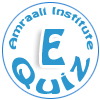
<style>
.page{position:relative;width:100px;height:100px;background:#ffffff}
.page>*{position:absolute;margin:0}
.t1{font:8.6px "HoboStd";color:#2c97ce}
.t2{font:42.7px "HoboStd";color:#2c97ce}
.t3{font:21.7px "HoboStd";color:#2c97ce}
</style>
<div class="page">
<p class="t1" style="left:9px;top:7px;width:84px;height:43px;text-align:center">Amraali Institute</p>
<p class="t2" style="left:42px;top:29px;width:23px;height:36px">E</p>
<p class="t3" style="left:12px;top:56px;width:78px;height:38px;rotate:2deg">Quiz</p>
</div>
